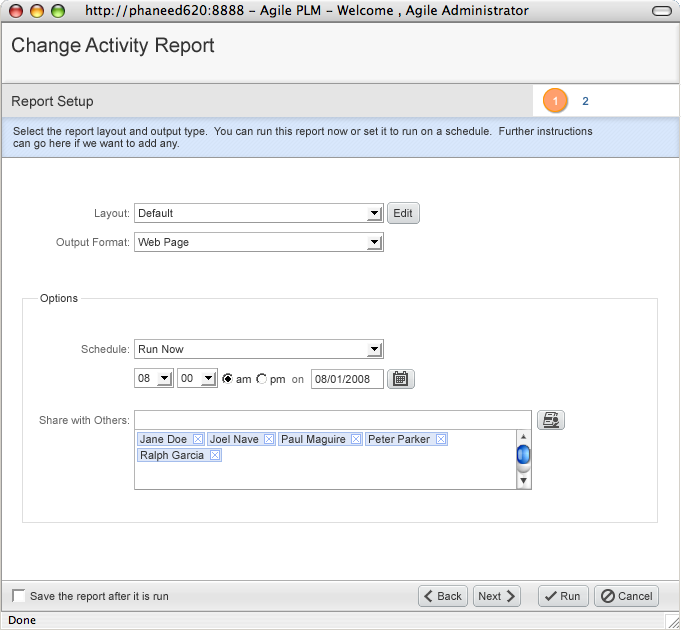
<style>
.page{position:relative;width:681px;height:630px;background:#ffffff}
.page>*{position:absolute;margin:0}
.t1{font:20px "ArialMT";color:#333333}
.t2{font:14px "ArialMT";color:#333333}
.t3{font:11px "ArialMT";color:#ffffff}
.t4{font:11px "ArialMT";color:#336699}
.t5{font:11px/12px "ArialMT";color:#333333}
.t6{font:11px "ArialMT";color:#666666}
.t7{font:11px "ArialMT";color:#333333}
</style>
<div class="page">
<p class="t1" style="left:12px;top:37px;width:203px;height:20px">Change Activity Report</p>
<p class="t2" style="left:12px;top:95px;width:81px;height:14px">Report Setup</p>
<p class="t3" style="left:553px;top:96px;width:4px;height:9px">1</p>
<p class="t4" style="left:582px;top:96px;width:7px;height:9px">2</p>
<p class="t5" style="left:13px;top:127px;width:580px;height:23px">Select the report layout and output type.  You can run this report now or set it to run on a schedule.  Further instructions <br>can go here if we want to add any.</p>
<p class="t6" style="left:95px;top:209px;width:34px;height:11px">Layout:</p>
<p class="t7" style="left:139px;top:209px;width:34px;height:8px">Default</p>
<p class="t7" style="left:394px;top:209px;width:19px;height:8px">Edit</p>
<p class="t6" style="left:56px;top:238px;width:73px;height:11px">Output Format:</p>
<p class="t7" style="left:138px;top:238px;width:51px;height:11px">Web Page</p>
<p class="t7" style="left:40px;top:294px;width:38px;height:11px">Options</p>
<p class="t6" style="left:81px;top:345px;width:48px;height:8px">Schedule:</p>
<p class="t7" style="left:139px;top:345px;width:45px;height:8px">Run Now</p>
<p class="t7" style="left:138px;top:374px;width:12px;height:8px">08</p>
<p class="t7" style="left:181px;top:374px;width:12px;height:8px">00</p>
<p class="t7" style="left:236px;top:377px;width:15px;height:6px">am</p>
<p class="t7" style="left:270px;top:377px;width:15px;height:9px">pm</p>
<p class="t6" style="left:292px;top:377px;width:12px;height:6px">on</p>
<p class="t7" style="left:315px;top:375px;width:55px;height:8px">08/01/2008</p>
<p class="t6" style="left:39px;top:416px;width:90px;height:8px">Share with Others:</p>
<p class="t7" style="left:30px;top:592px;width:138px;height:11px">Save the report after it is run</p>
<p class="t7" style="left:438px;top:592px;width:24px;height:8px">Back</p>
<p class="t7" style="left:479px;top:592px;width:22px;height:8px">Next</p>
<p class="t7" style="left:561px;top:592px;width:19px;height:8px">Run</p>
<p class="t7" style="left:618px;top:592px;width:34px;height:8px">Cancel</p>
</div>
